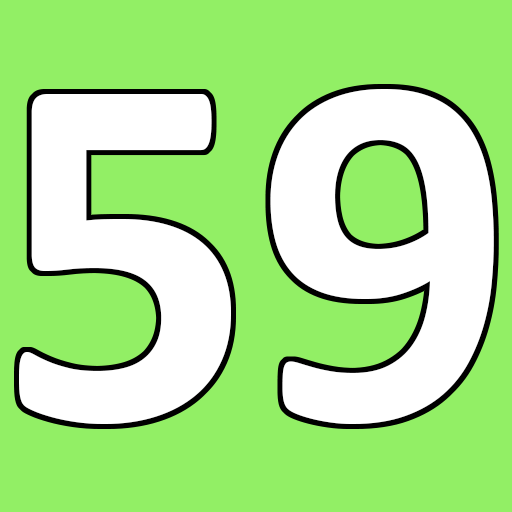
<style>
.page{position:relative;width:512px;height:512px;background:#92ef65}
.page>*{position:absolute;margin:0}
.t1{font:511.5px "Calibri-Bold";color:#ffffff}
</style>
<div class="page">
<p class="t1" style="left:19px;top:89px;width:475px;height:335px">59</p>
</div>
